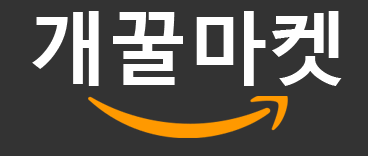
<style>
.page{position:relative;width:368px;height:156px;background:#333333}
.page>*{position:absolute;margin:0}
.t1{font:80px "MalgunGothicBold";color:#ffffff}
</style>
<div class="page">
<p class="t1" style="left:32px;top:11px;width:310px;height:75px">개꿀마켓</p>
</div>
